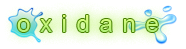
<style>
.page{position:relative;width:186px;height:49px;background:#ffffff}
.page>*{position:absolute;margin:0}
.t1{font:24px "ArialMT";letter-spacing:0.4em;color:#c2f57c}
</style>
<div class="page">
<p class="t1" style="left:17px;top:15px;width:141px;height:17px">oxidane</p>
</div>
